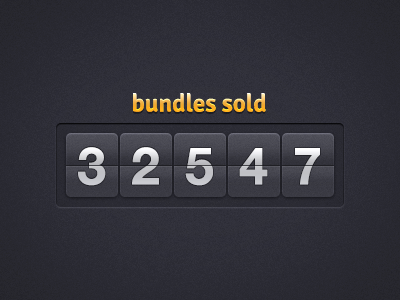
<style>
.page{position:relative;width:400px;height:300px}
.page>*{position:absolute;margin:0}
.t1{font:25px "Signika-Semibold"}
.t2{font:52px "HelveticaNeue-Bold";color:#bbbcc1}
.t3{font:52px "HelveticaNeue-Bold"}
</style>
<div class="page">
<p class="t1" style="left:133px;top:93px;width:133px;height:19px">bundles sold</p>
<p class="t2" style="left:78px;top:147px;width:28px;height:39px">3</p>
<p class="t2" style="left:132px;top:147px;width:27px;height:38px">2</p>
<p class="t2" style="left:185px;top:148px;width:28px;height:38px">5</p>
<p class="t2" style="left:239px;top:148px;width:29px;height:37px">4</p>
<p class="t3" style="left:295px;top:148px;width:25px;height:37px">7</p>
</div>
